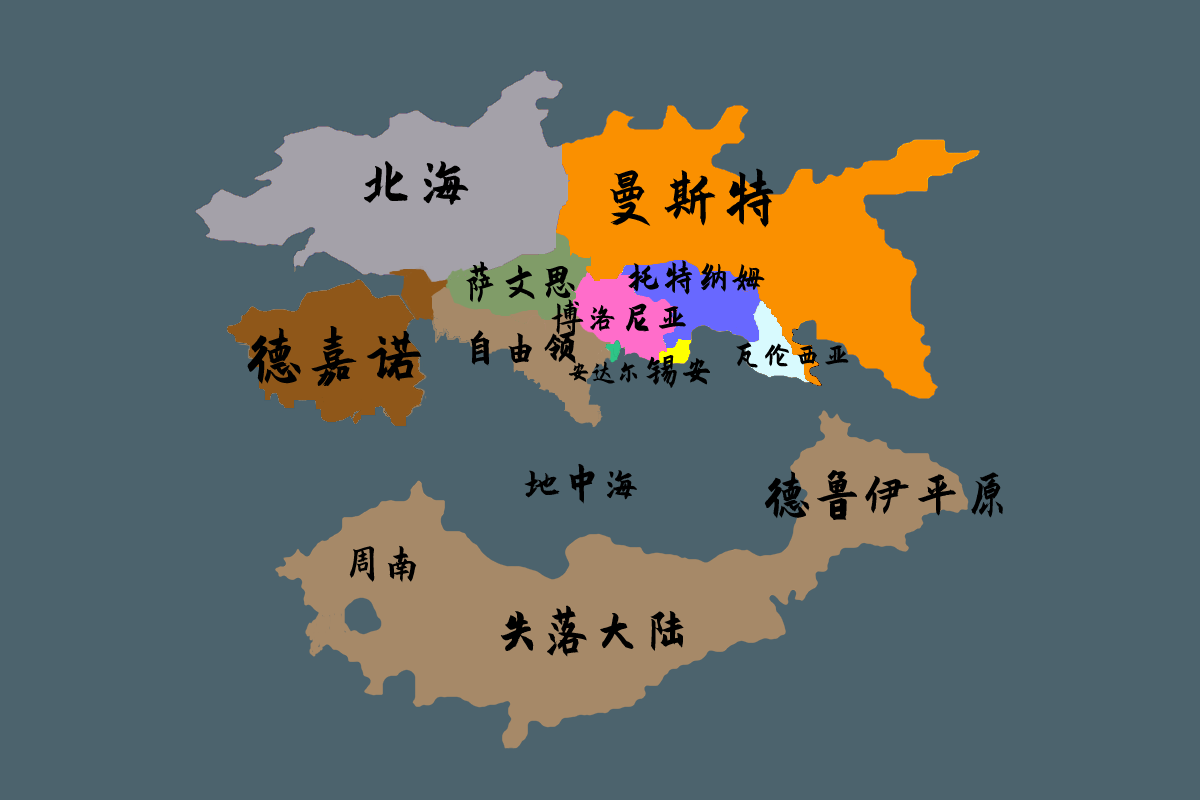
<style>
.page{position:relative;width:1200px;height:800px;background:#4c636d}
.page>*{position:absolute;margin:0}
.t1{font:60px "PangMenZhengDao-Cu";color:#000000}
.t2{font:40px "PangMenZhengDao-Cu";color:#000000}
.t3{font:35px "PangMenZhengDao-Cu";color:#000000}
.t4{font:30px "PangMenZhengDao-Cu";color:#000000}
.t5{font:25px "PangMenZhengDao-Cu";color:#000000}
.t6{font:50px "PangMenZhengDao-Cu";color:#000000}
</style>
<div class="page">
<p class="t1" style="left:363px;top:161px;width:106px;height:44px">北海</p>
<p class="t1" style="left:609px;top:168px;width:165px;height:60px">曼斯特</p>
<p class="t2" style="left:466px;top:261px;width:110px;height:42px">萨文思</p>
<p class="t3" style="left:627px;top:260px;width:138px;height:35px">托特纳姆</p>
<p class="t3" style="left:551px;top:299px;width:136px;height:37px">博洛尼亚</p>
<p class="t1" style="left:247px;top:325px;width:175px;height:62px">德嘉诺</p>
<p class="t2" style="left:470px;top:330px;width:106px;height:36px">自由领</p>
<p class="t4" style="left:736px;top:342px;width:113px;height:26px">瓦伦西亚</p>
<p class="t5" style="left:568px;top:361px;width:70px;height:23px">安达尔</p>
<p class="t3" style="left:646px;top:354px;width:65px;height:35px">锡安</p>
<p class="t2" style="left:524px;top:463px;width:113px;height:42px">地中海</p>
<p class="t6" style="left:764px;top:469px;width:239px;height:52px">德鲁伊平原</p>
<p class="t2" style="left:349px;top:545px;width:68px;height:38px">周南</p>
<p class="t6" style="left:500px;top:605px;width:184px;height:52px">失落大陆</p>
</div>
